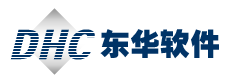
<style>
.page{position:relative;width:230px;height:84px;background:#ffffff}
.page>*{position:absolute;margin:0}
.t1{font:30px "HeitiEG-Ultra-GB";color:#003366}
</style>
<div class="page">
<p class="t1" style="left:100px;top:29px;width:119px;height:30px">东华软件</p>
</div>
